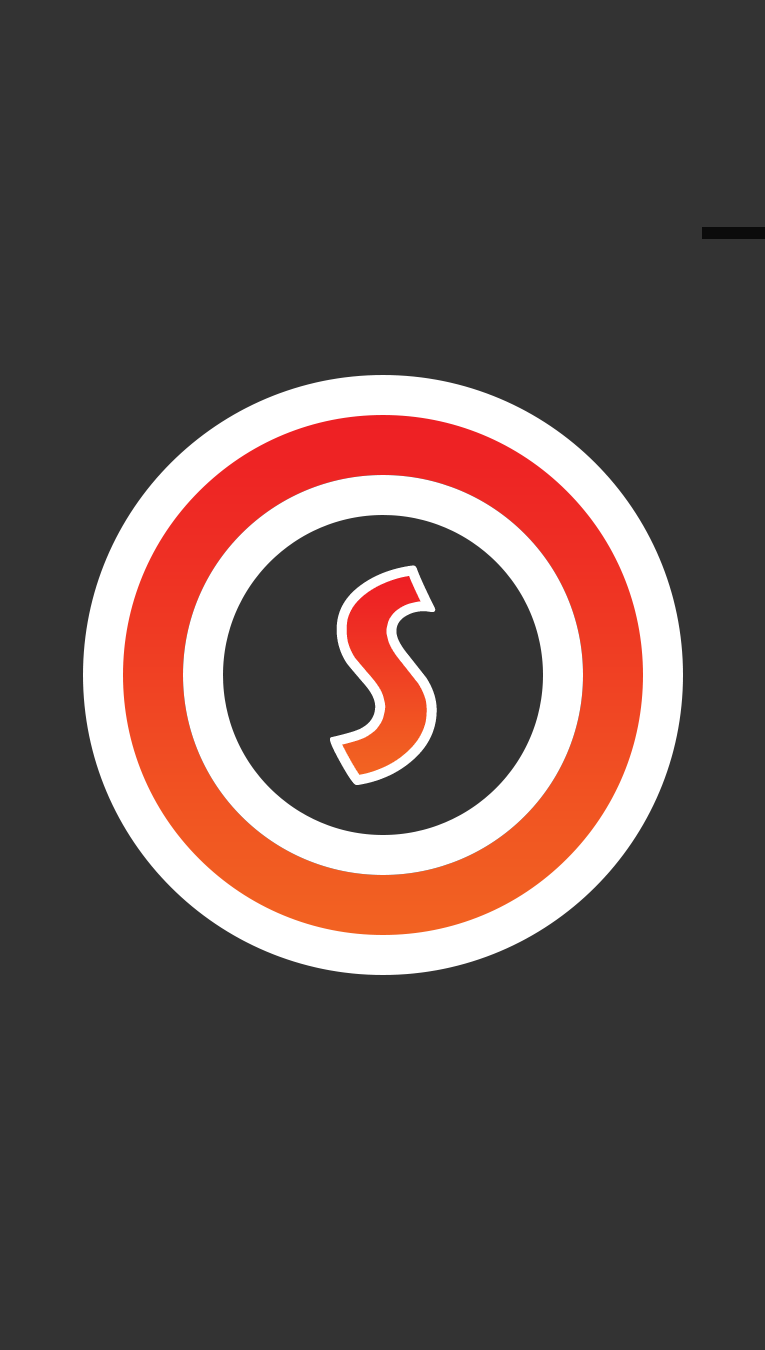
<style>
.page{position:relative;width:765px;height:1350px;background:#333333}
.page>*{position:absolute;margin:0}
.t1{font:300px "BerlinSansFBDemi-Bold";letter-spacing:0.2em}
</style>
<div class="page">
<p class="t1" style="left:330px;top:565px;width:107px;height:220px">S</p>
</div>
